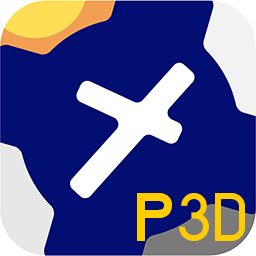
<style>
.page{position:relative;width:256px;height:256px;background:#020e72}
.page>*{position:absolute;margin:0}
.t1{font:48px "RAF_PW_ATH";color:#ffcc00}
.t2{font:48px "RCAF_60SQO_ATH";color:#ffcc00}
</style>
<div class="page">
<p class="t1" style="left:137px;top:193px;width:108px;height:48px"><span class="t2">P</span>3D</p>
</div>
